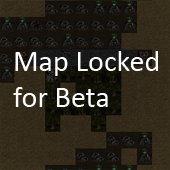
<style>
.page{position:relative;width:170px;height:170px}
.page>*{position:absolute;margin:0}
.t1{font:30px "Calibri";color:#ffffff}
</style>
<div class="page">
<p class="t1" style="left:13px;top:51px;width:145px;height:56px">Map Locked for Beta</p>
</div>
